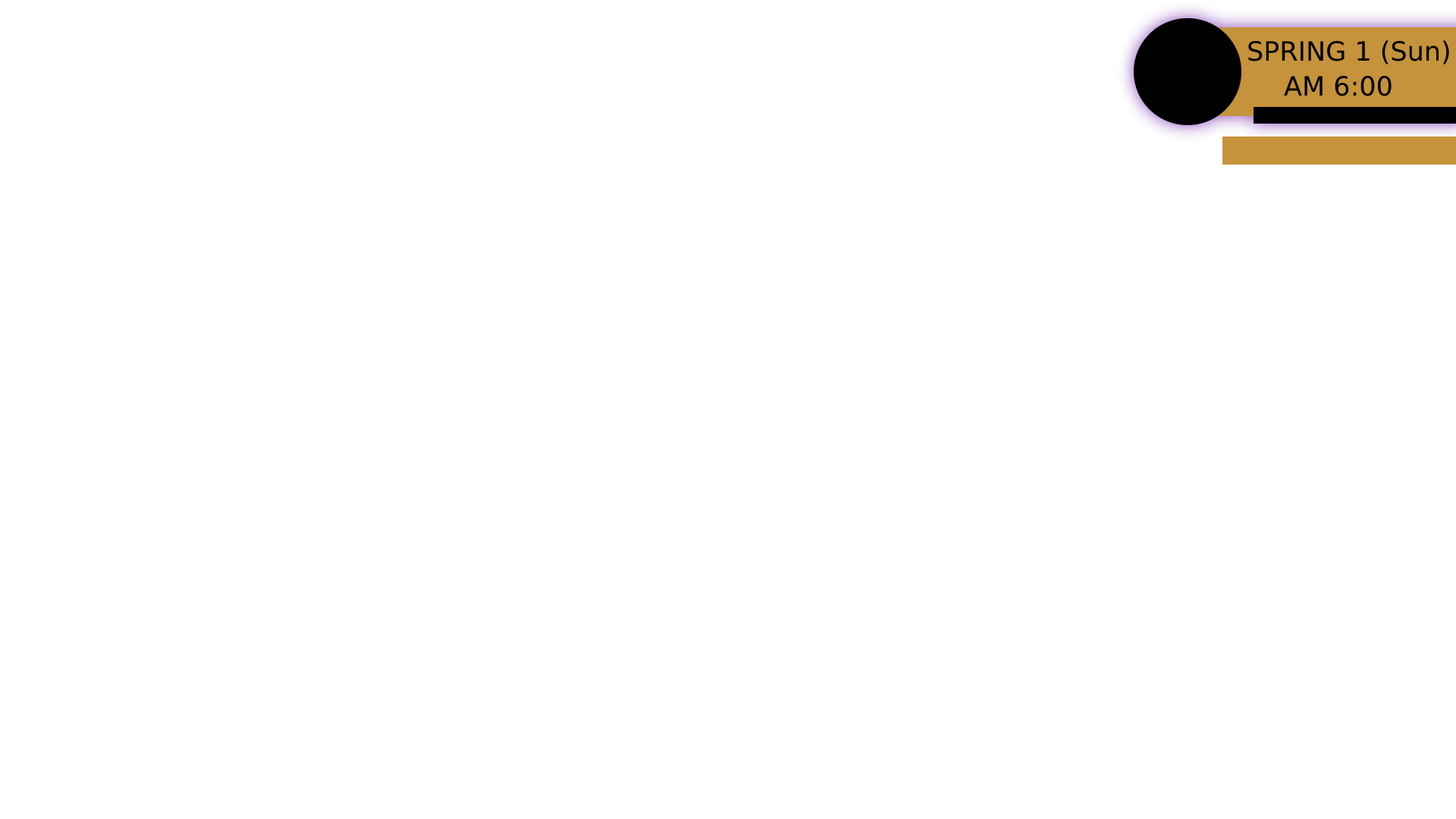
<style>
.page{position:relative;width:1456px;height:819px;background:#ffffff}
.page>*{position:absolute;margin:0}
.t1{font:26.5px "DejaVuSans";color:#000000}
</style>
<div class="page">
<p class="t1" style="left:1248px;top:40px;width:201px;height:24px">SPRING 1 (Sun)</p>
<p class="t1" style="left:1284px;top:76px;width:108px;height:20px">AM 6:00</p>
</div>
